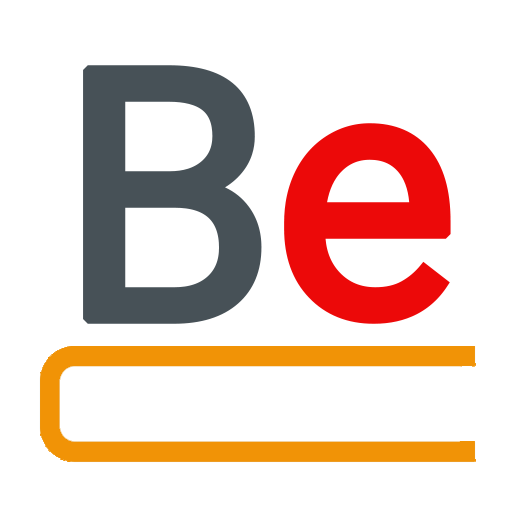
<style>
.page{position:relative;width:512px;height:512px;background:#ffffff}
.page>*{position:absolute;margin:0}
.t1{font:349.8px "Roboto-Regular";color:#475157;font-weight:bold}
.t2{font:349.8px "Roboto-Regular";color:#ec0909;font-weight:bold}
</style>
<div class="page">
<p class="t1" style="left:83px;top:65px;width:179px;height:259px">B</p>
<p class="t2" style="left:284px;top:123px;width:167px;height:201px">e</p>
</div>
